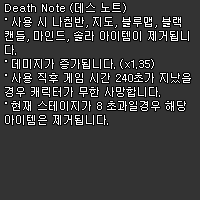
<style>
.page{position:relative;width:200px;height:200px;background:#333333}
.page>*{position:absolute;margin:0}
.t1{font:11px/14px "Dotum";color:#ffffff}
</style>
<div class="page">
<p class="t1" style="left:5px;top:3px;width:186px;height:122px">Death Note (데스 노트)<br>˚ 사용 시 나침반, 지도, 블루맵, 블랙<br>캔들, 마인드, 솔라 아이템이 제거됩니<br>다.<br>˚ 데미지가 증가됩니다. (x1.35)<br>˚ 사용 직후 게임 시간 240초가 지났을<br>경우 캐릭터가 무한 사망합니다.<br>˚ 현재 스테이지가 8 초과일경우 해당<br>아이템은 제거됩니다.</p>
</div>
